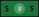
<style>
.page{position:relative;width:39px;height:17px;background:#20723d}
.page>*{position:absolute;margin:0}
.t1{font:8px "MyriadPro-Regular";letter-spacing:-0.02em;font-weight:bold}
</style>
<div class="page">
<p class="t1" style="left:5px;top:5px;width:4px;height:7px">$</p>
<p class="t1" style="left:30px;top:5px;width:4px;height:7px">$</p>
</div>
